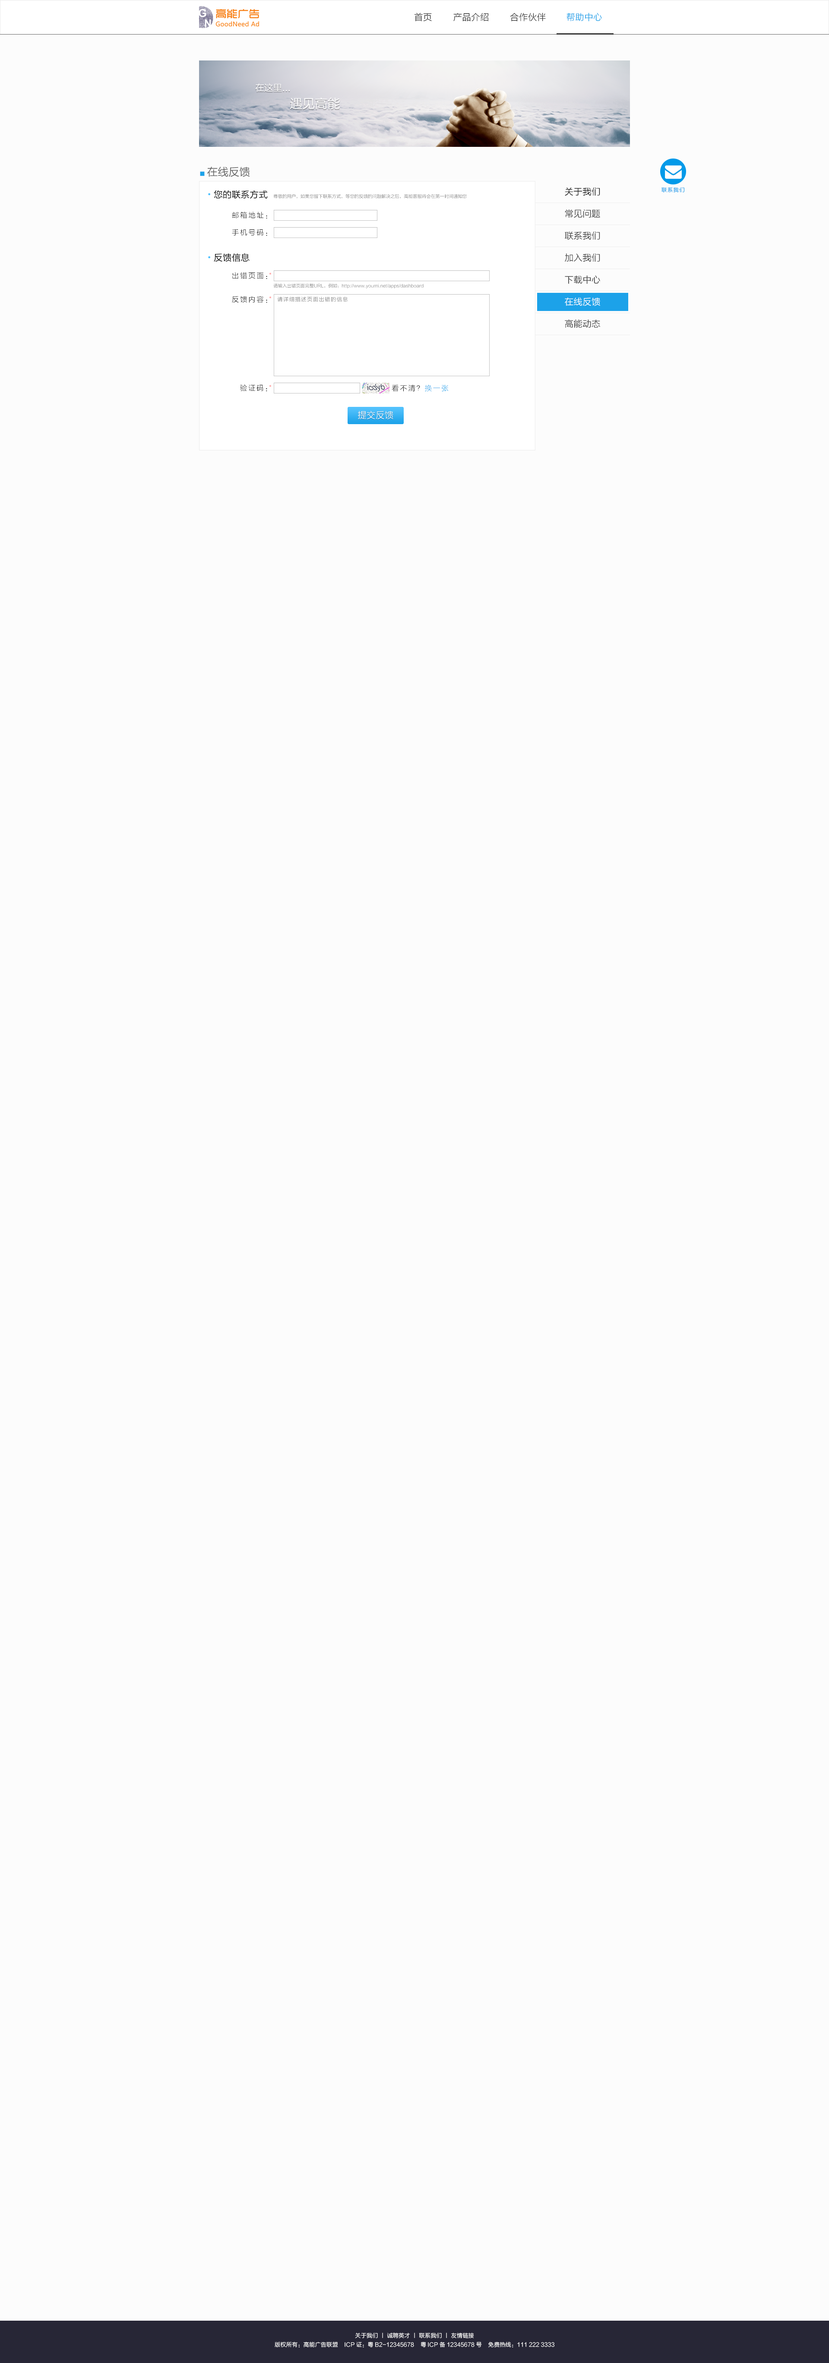
<style>
.page{position:relative;width:829px;height:2363px;background:#fcfcfc}
.page>*{position:absolute;margin:0}
.t1{font:9px "FZLTXHK";color:#333333}
.t2{font:9px "FZLTXHK";color:#1ca2e9}
.t3{font:9px "FZLTHK--GBK1-0";color:#fcfcfc}
.t4{font:12.6px "FZLTHK--GBK1-0";color:#fcfcfc}
.t5{font:10.8px "FZLTHK--GBK1-0";color:#666666}
.t6{font:5.4px "FZLTHK--GBK1-0";color:#1ca2e9}
.t7{font:9px "FZLTHK--GBK1-0";color:#000000}
.t8{font:9px "AdobeHeitiStd-Regular";color:#47c0ff}
.t9{font:4.5px "FZLTXHK";color:#666666}
.t10{font:9px "FZLTXHK";color:#000000}
.t11{font:5.4px "FZLTXHK";letter-spacing:0.1em;color:#039ae9}
.t12{font:7.2px "FZLTXHK";letter-spacing:0.15em;color:#000000}
.t13{font:5.4px "FZLTXHK"}
.t14{font:4.5px "FZLTXHK"}
.t15{font:5.4px "FZLTXHK";letter-spacing:0.1em}
.t16{font:9px "FZLTXHK";color:#ffffff}
.t17{font:7.2px "FZLTXHK";letter-spacing:0.15em;color:#1ca2e9}
.t18{font:5.8px "FZLTXHK";color:#ffffff}
</style>
<div class="page">
<p class="t1" style="left:414px;top:13px;width:18px;height:9px">首页</p>
<p class="t1" style="left:454px;top:13px;width:35px;height:9px">产品介绍</p>
<p class="t1" style="left:510px;top:13px;width:36px;height:9px">合作伙伴</p>
<p class="t2" style="left:567px;top:13px;width:35px;height:9px">帮助中心</p>
<p class="t3" style="left:255px;top:83px;width:35px;height:9px">在这里...</p>
<p class="t4" style="left:290px;top:97px;width:50px;height:12px">遇见高能</p>
<p class="t5" style="left:200px;top:167px;width:50px;height:10px"><span class="t6">■ </span>在线反馈</p>
<p class="t7" style="left:208px;top:190px;width:60px;height:9px"><span class="t8">•</span>您的联系方式</p>
<p class="t9" style="left:273px;top:194px;width:194px;height:5px">尊敬的用户，如果您留下联系方式，等您的反馈的问题解决之后，高能客服将会在第一时间通知您</p>
<p class="t10" style="left:565px;top:187px;width:35px;height:9px">关于我们</p>
<p class="t11" style="left:662px;top:187px;width:23px;height:6px">联系我们</p>
<p class="t1" style="left:565px;top:209px;width:35px;height:9px">常见问题</p>
<p class="t12" style="left:232px;top:212px;width:35px;height:7px">邮箱地址：</p>
<p class="t12" style="left:232px;top:229px;width:35px;height:7px">手机号码：</p>
<p class="t1" style="left:565px;top:232px;width:35px;height:8px">联系我们</p>
<p class="t7" style="left:208px;top:253px;width:42px;height:9px"><span class="t8">•</span>反馈信息</p>
<p class="t1" style="left:565px;top:253px;width:35px;height:9px">加入我们</p>
<p class="t12" style="left:232px;top:272px;width:35px;height:7px">出错页面：</p>
<p class="t13" style="left:270px;top:273px;width:2px;height:2px">*</p>
<p class="t1" style="left:565px;top:275px;width:35px;height:9px">下载中心</p>
<p class="t14" style="left:273px;top:283px;width:151px;height:6px">请输入出错页面完整URL，例如：http://www.youmi.net/apps/dashboard</p>
<p class="t12" style="left:232px;top:296px;width:35px;height:7px">反馈内容：</p>
<p class="t13" style="left:270px;top:296px;width:2px;height:3px">*</p>
<p class="t15" style="left:277px;top:297px;width:71px;height:5px">请详细描述页面出错的信息</p>
<p class="t16" style="left:565px;top:298px;width:35px;height:8px">在线反馈</p>
<p class="t1" style="left:565px;top:319px;width:35px;height:9px">高能动态</p>
<p class="t12" style="left:240px;top:384px;width:27px;height:7px">验证码：</p>
<p class="t13" style="left:270px;top:385px;width:2px;height:2px">*</p>
<p class="t12" style="left:392px;top:384px;width:56px;height:8px">看不清？<span class="t17">换一张</span></p>
<p class="t16" style="left:358px;top:411px;width:36px;height:8px">提交反馈</p>
<p class="t18" style="left:355px;top:2333px;width:119px;height:6px">关于我们 丨 诚聘英才 丨 联系我们 丨 友情链接</p>
<p class="t18" style="left:275px;top:2342px;width:280px;height:6px">版权所有：高能广告联盟    ICP证：粤B2-12345678    粤ICP备12345678号    免费热线：111 222 3333</p>
</div>
